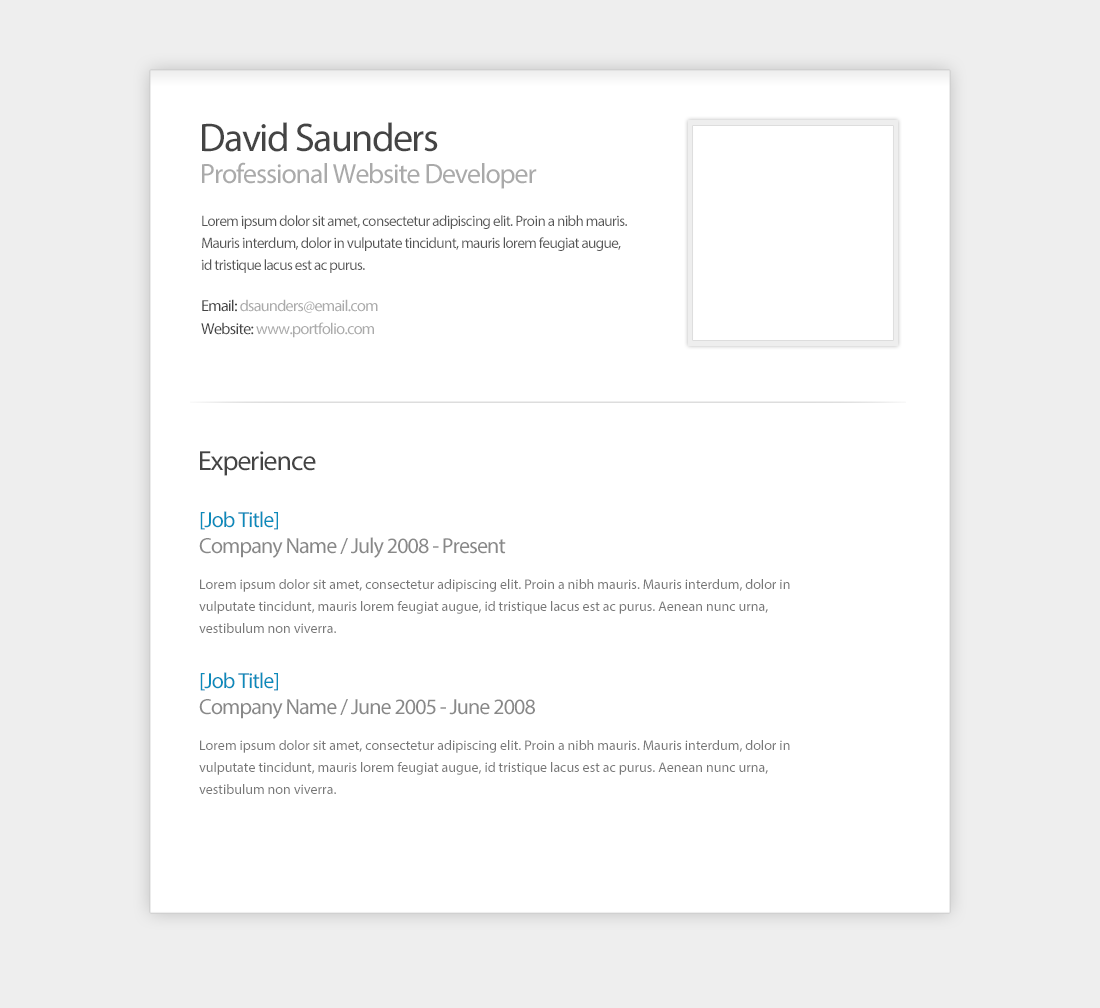
<style>
.page{position:relative;width:1100px;height:1008px;background:#ffffff}
.page>*{position:absolute;margin:0}
.t1{font:40px "MyriadPro-Regular";letter-spacing:-0.04em;color:#444444}
.t2{font:28px "MyriadPro-Regular";letter-spacing:-0.04em;color:#aaaaaa}
.t3{font:15px/22px "MyriadPro-Regular";letter-spacing:-0.04em;color:#555555}
.t4{font:16px "MyriadPro-Regular";letter-spacing:-0.04em;color:#aaaaaa}
.t5{font:16px "MyriadPro-Regular";letter-spacing:-0.04em;color:#444444}
.t6{font:28px "MyriadPro-Regular";letter-spacing:-0.04em;color:#444444}
.t7{font:22px "MyriadPro-Regular";letter-spacing:-0.04em;color:#0b8bbb}
.t8{font:22px "MyriadPro-Regular";letter-spacing:-0.04em;color:#888888}
.t9{font:14px/22px "MyriadPro-Regular";color:#777777}
</style>
<div class="page">
<p class="t1" style="left:202px;top:122px;width:236px;height:30px">David Saunders</p>
<p class="t2" style="left:202px;top:162px;width:335px;height:27px">Professional Website Developer</p>
<p class="t3" style="left:201px;top:215px;width:426px;height:58px">Lorem ipsum dolor sit amet, consectetur adipiscing elit. Proin a nibh mauris. Mauris interdum, dolor in vulputate tincidunt, mauris lorem feugiat augue, id tristique lacus est ac purus.</p>
<p class="t4" style="left:202px;top:299px;width:176px;height:14px"><span class="t5">Email: </span>dsaunders@email.com</p>
<p class="t4" style="left:201px;top:322px;width:173px;height:16px"><span class="t5">Website: </span>www.portfolio.com</p>
<p class="t6" style="left:200px;top:451px;width:116px;height:25px">Experience</p>
<p class="t7" style="left:200px;top:511px;width:78px;height:19px">[Job Title]</p>
<p class="t8" style="left:199px;top:537px;width:307px;height:21px">Company Name / July 2008 - Present</p>
<p class="t9" style="left:199px;top:579px;width:591px;height:54px">Lorem ipsum dolor sit amet, consectetur adipiscing elit. Proin a nibh mauris. Mauris interdum, dolor in vulputate tincidunt, mauris lorem feugiat augue, id tristique lacus est ac purus. Aenean nunc urna, vestibulum non viverra.</p>
<p class="t7" style="left:200px;top:672px;width:78px;height:19px">[Job Title]</p>
<p class="t8" style="left:199px;top:699px;width:336px;height:20px">Company Name / June 2005 - June 2008</p>
<p class="t9" style="left:199px;top:740px;width:591px;height:54px">Lorem ipsum dolor sit amet, consectetur adipiscing elit. Proin a nibh mauris. Mauris interdum, dolor in vulputate tincidunt, mauris lorem feugiat augue, id tristique lacus est ac purus. Aenean nunc urna, vestibulum non viverra.</p>
</div>
